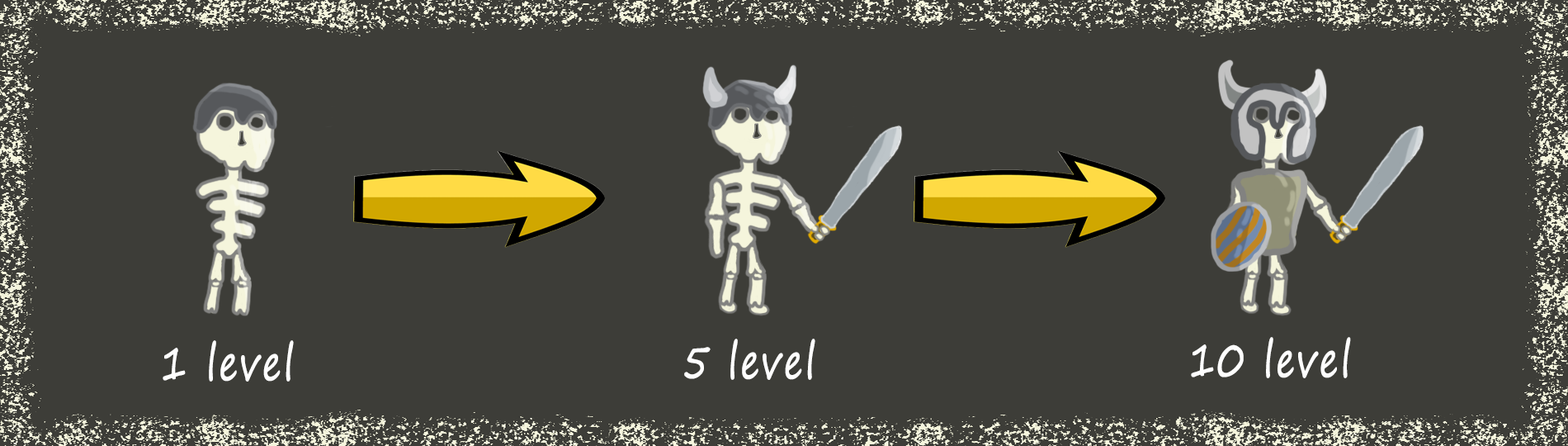
<style>
.page{position:relative;width:1568px;height:446px;background:#3d3d38}
.page>*{position:absolute;margin:0}
.t1{font:46.9px "SegoePrint";letter-spacing:0.04em;color:#fefefe;font-weight:bold;scale:0.77 1}
</style>
<div class="page">
<p class="t1" style="left:163px;top:340px;width:131px;height:41px">1 level</p>
<p class="t1" style="left:684px;top:338px;width:131px;height:42px">5 level</p>
<p class="t1" style="left:1191px;top:337px;width:160px;height:41px">10 level</p>
</div>
